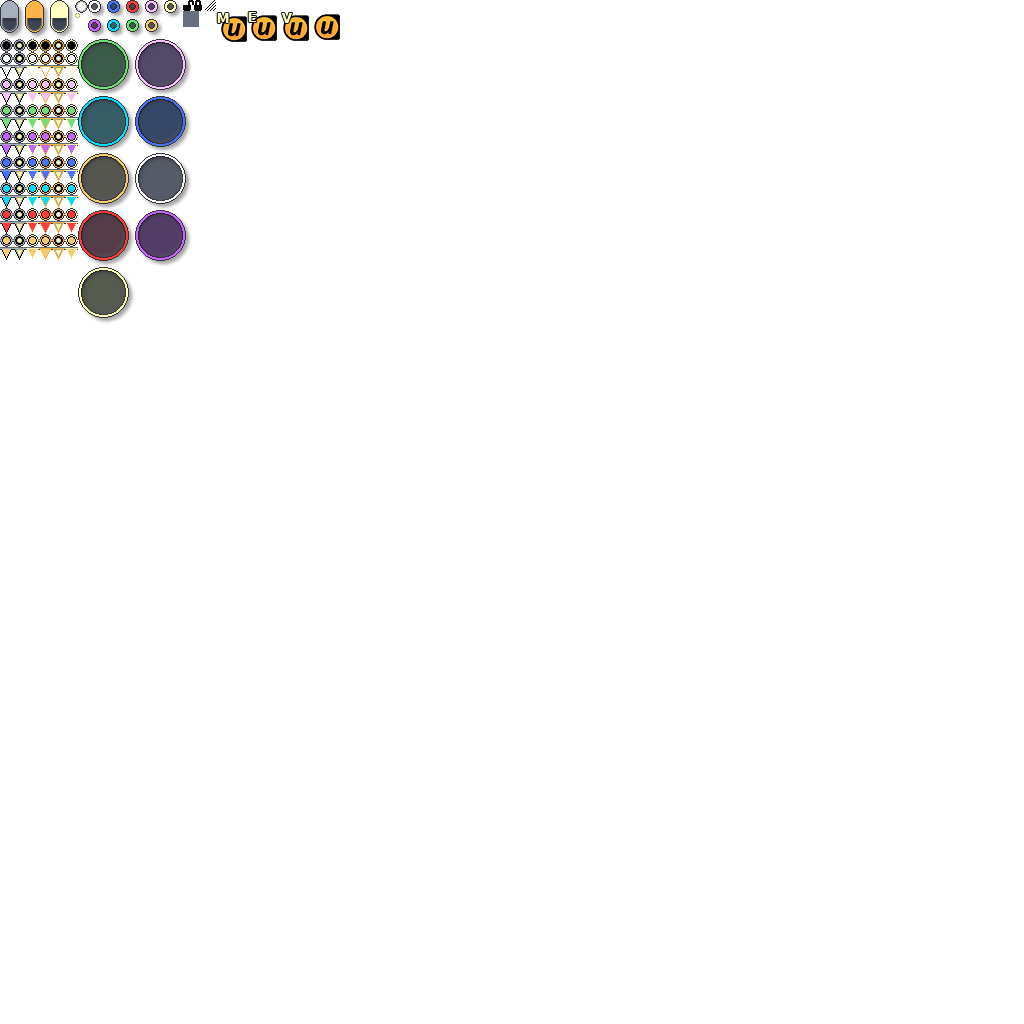
<style>
.page{position:relative;width:1024px;height:1024px;background:#ffffff}
.page>*{position:absolute;margin:0}
.t1{font:14px "Verdana-Bold";color:#ffffc4}
</style>
<div class="page">
<p class="t1" style="left:217px;top:13px;width:12px;height:10px">M</p>
<p class="t1" style="left:248px;top:12px;width:9px;height:10px">E</p>
<p class="t1" style="left:281px;top:13px;width:11px;height:10px">V</p>
</div>
